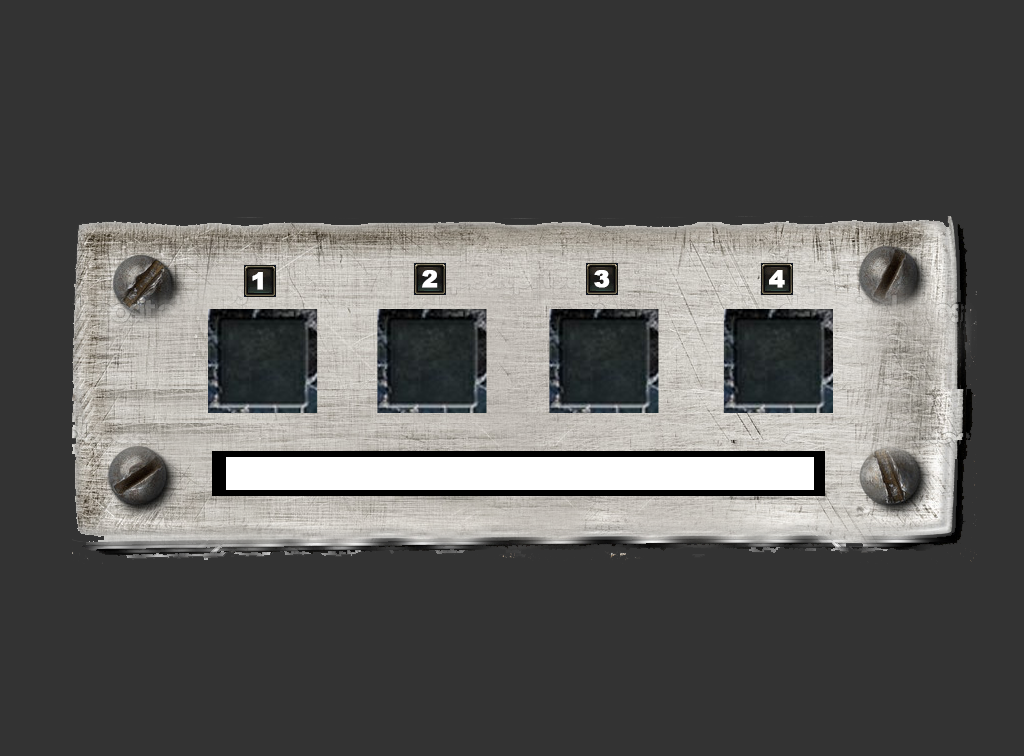
<style>
.page{position:relative;width:1024px;height:756px;background:#333333}
.page>*{position:absolute;margin:0}
.t1{font:24px "Arial-Black";color:#ffffff;font-weight:bold}
</style>
<div class="page">
<p class="t1" style="left:422px;top:270px;width:16px;height:18px">2</p>
<p class="t1" style="left:594px;top:270px;width:16px;height:18px">3</p>
<p class="t1" style="left:769px;top:270px;width:16px;height:18px">4</p>
<p class="t1" style="left:252px;top:272px;width:11px;height:18px">1</p>
</div>
